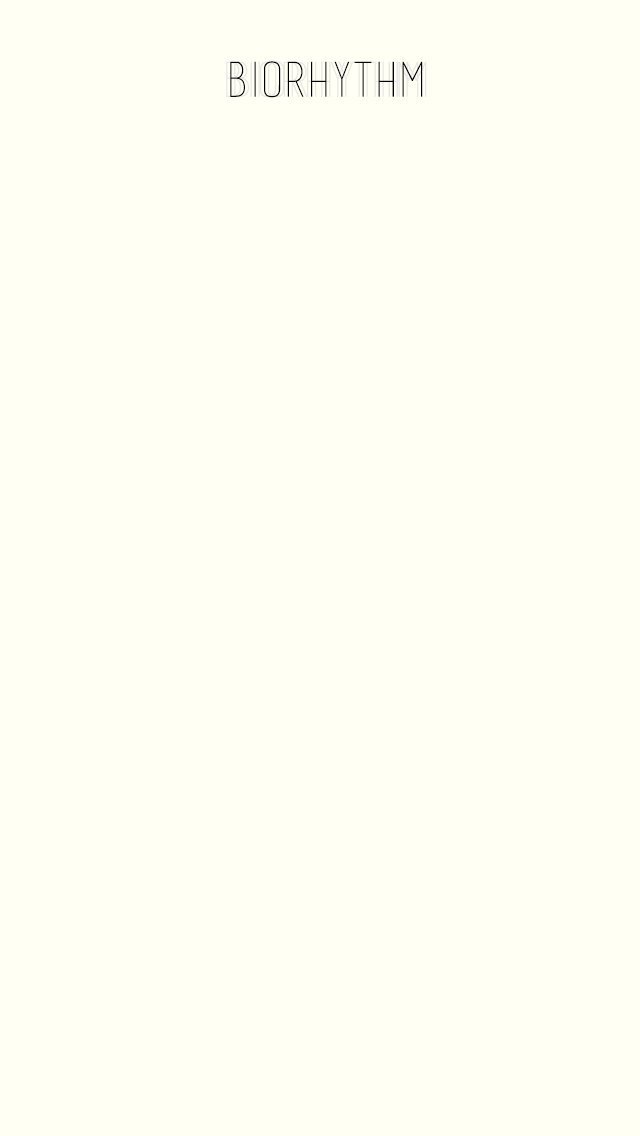
<style>
.page{position:relative;width:640px;height:1136px;background:#fffff3}
.page>*{position:absolute;margin:0}
.t1{font:48px "basictitlefont";color:#000000}
</style>
<div class="page">
<p class="t1" style="left:230px;top:61px;width:193px;height:37px">BIORHYTHM</p>
</div>
